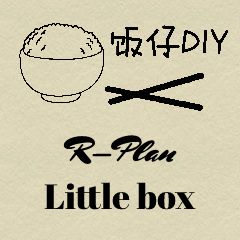
<style>
.page{position:relative;width:240px;height:240px}
.page>*{position:absolute;margin:0}
.t1{font:35px "MrsSheppards-Regular";color:#000000}
.t2{font:35px "AbrilFatface-Regular";color:#000000}
</style>
<div class="page">
<p class="t1" style="left:63px;top:135px;width:114px;height:29px">R-Plan</p>
<p class="t2" style="left:44px;top:182px;width:152px;height:28px">Little box</p>
</div>
